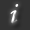
<style>
.page{position:relative;width:30px;height:30px;background:#333333}
.page>*{position:absolute;margin:0}
.t1{font:30px "MonotypeCorsiva";color:#ffffff}
</style>
<div class="page">
<p class="t1" style="left:10px;top:4px;width:9px;height:20px">i</p>
</div>
